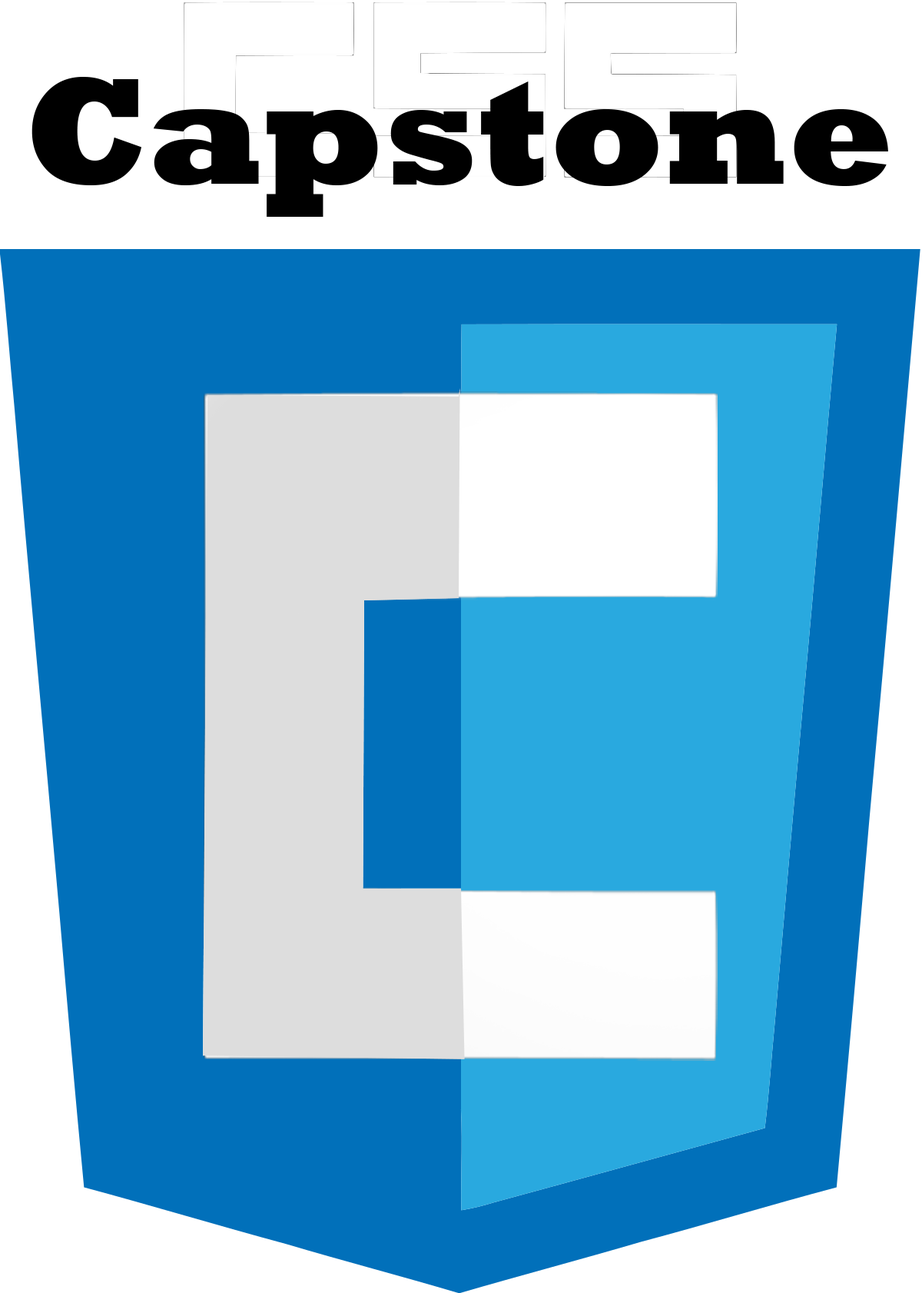
<style>
.page{position:relative;width:922px;height:1293px;background:#0170ba}
.page>*{position:absolute;margin:0}
.t1{font:153.7px "Rockwell-ExtraBold";color:#000000}
</style>
<div class="page">
<p class="t1" style="left:32px;top:77px;width:857px;height:140px">Capstone</p>
</div>
